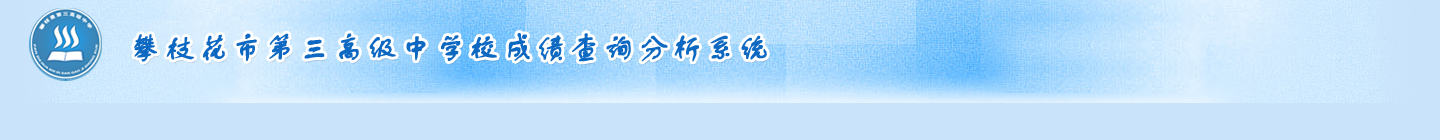
<style>
.page{position:relative;width:1440px;height:140px;background:#c9e3fa}
.page>*{position:absolute;margin:0}
.t1{font:30px "FZSTK--GBK1-0";letter-spacing:0.1em;color:#0d68c1;font-weight:bold}
</style>
<div class="page">
<p class="t1" style="left:134px;top:33px;width:633px;height:29px">攀枝花市第三高级中学校成绩查询分析系统</p>
</div>
